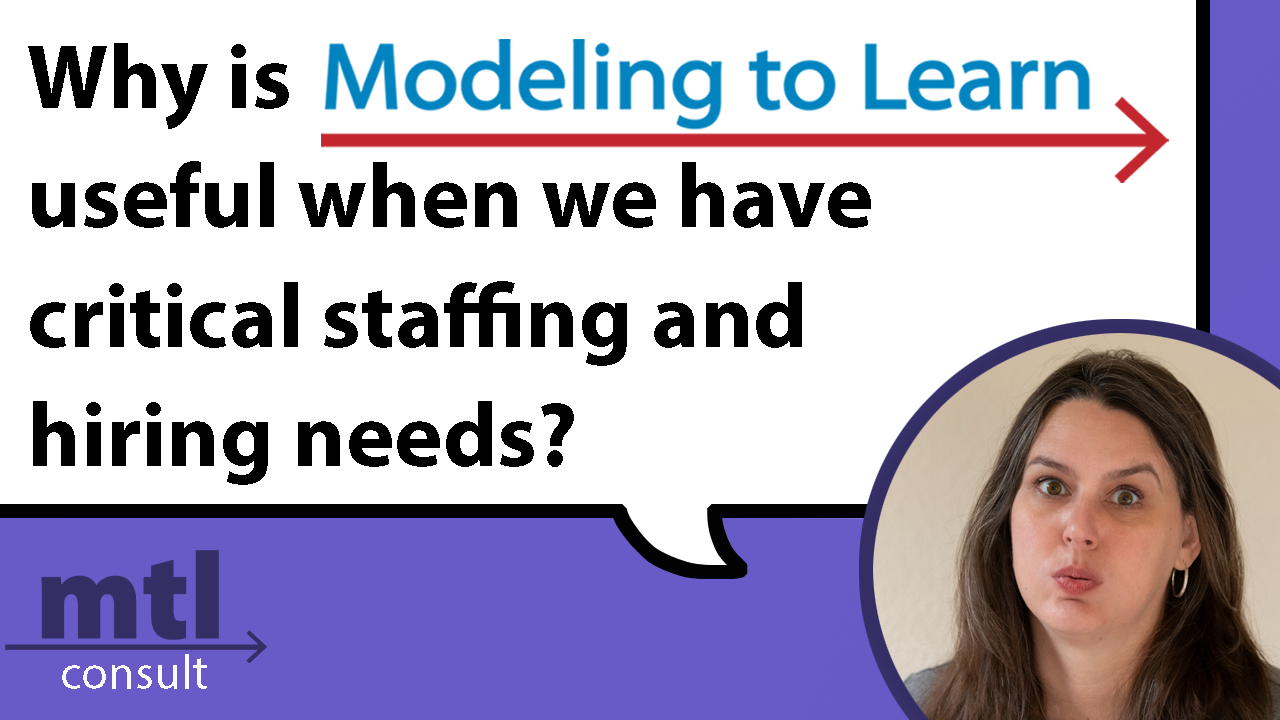
<style>
.page{position:relative;width:1280px;height:720px;background:#ffffff}
.page>*{position:absolute;margin:0}
.t1{font:91.7px/108.3px "MyriadPro-Bold";color:#000000}
</style>
<div class="page">
<p class="t1" style="left:28px;top:43px;width:843px;height:442px">Why is <br>useful when we have <br>critical staffing and <br>hiring needs?</p>
</div>
